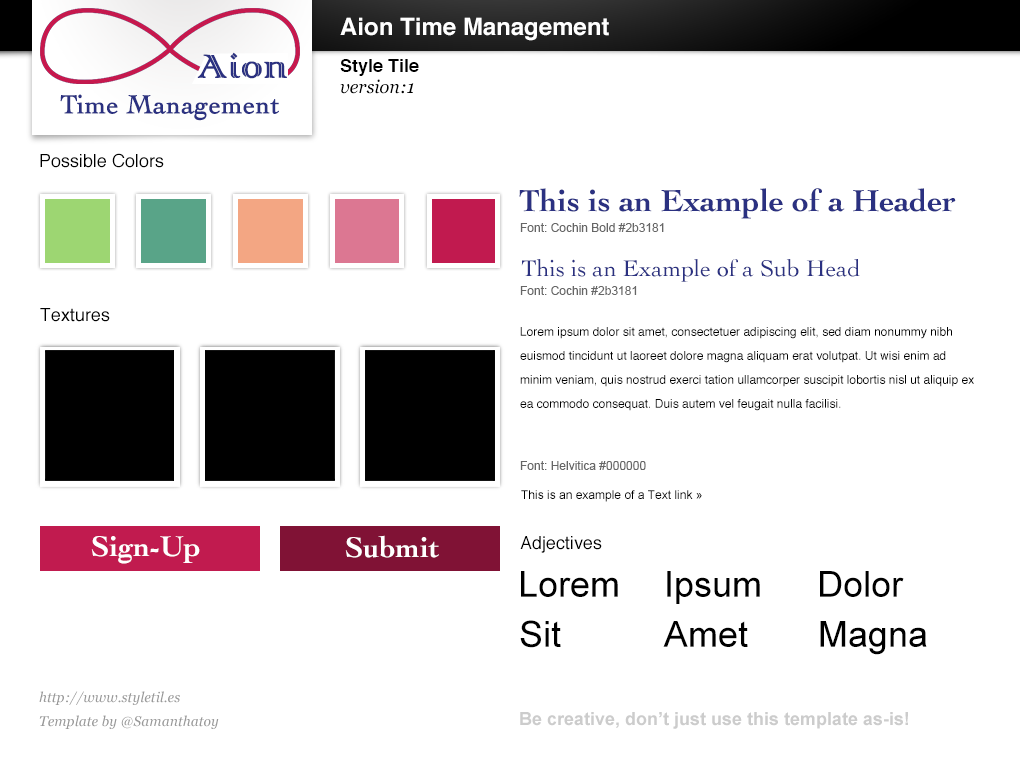
<style>
.page{position:relative;width:1020px;height:760px;background:#ffffff}
.page>*{position:absolute;margin:0}
.t1{font:24px "Helvetica-Bold";color:#ffffff}
.t2{font:43.1px "ColonnaMT";color:#2b3181;font-weight:bold}
.t3{font:18px "Helvetica-Bold";color:#000000}
.t4{font:18px "Georgia-Italic";color:#000000}
.t5{font:26.9px "Cochin";color:#2b3181;font-weight:bold}
.t6{font:18px "Helvetica";color:#000000}
.t7{font:32px "Cochin-Bold";color:#2b3181}
.t8{font:12px "ArialMT";color:#666666}
.t9{font:24px "Cochin";color:#2b3181}
.t10{font:12px/24px "Helvetica";color:#000000}
.t11{font:12px "ArialMT";color:#000000}
.t12{font:30px "Cochin-Bold";color:#ffffff}
.t13{font:36px "ArialMT";color:#000000}
.t14{font:14px/24px "Georgia-Italic";color:#999999}
.t15{font:18px "Arial-BoldMT";color:#cccccc}
</style>
<div class="page">
<p class="t1" style="left:340px;top:17px;width:269px;height:24px">Aion Time Management</p>
<p class="t2" style="left:197px;top:52px;width:90px;height:27px">Aion</p>
<p class="t3" style="left:340px;top:59px;width:79px;height:17px">Style Tile</p>
<p class="t4" style="left:340px;top:79px;width:74px;height:15px">version:1</p>
<p class="t5" style="left:60px;top:94px;width:219px;height:27px">Time Management</p>
<p class="t6" style="left:40px;top:153px;width:124px;height:15px">Possible Colors</p>
<p class="t7" style="left:519px;top:188px;width:437px;height:31px">This is an Example of a Header</p>
<p class="t8" style="left:520px;top:223px;width:144px;height:9px">Font: Cochin Bold #2b3181</p>
<p class="t9" style="left:521px;top:259px;width:339px;height:23px">This is an Example of a Sub Head</p>
<p class="t8" style="left:520px;top:286px;width:117px;height:9px">Font: Cochin #2b3181</p>
<p class="t6" style="left:40px;top:308px;width:70px;height:14px">Textures</p>
<p class="t10" style="left:520px;top:327px;width:454px;height:84px">Lorem ipsum dolor sit amet, consectetuer adipiscing elit, sed diam nonummy nibh euismod tincidunt ut laoreet dolore magna aliquam erat volutpat. Ut wisi enim ad minim veniam, quis nostrud exerci tation ullamcorper suscipit lobortis nisl ut aliquip ex ea commodo consequat. Duis autem vel feugait nulla facilisi.</p>
<p class="t8" style="left:520px;top:461px;width:126px;height:9px">Font: Helvitica #000000</p>
<p class="t11" style="left:521px;top:490px;width:181px;height:12px">This is an example of a Text link »</p>
<p class="t12" style="left:91px;top:536px;width:109px;height:28px">Sign-Up</p>
<p class="t12" style="left:345px;top:535px;width:94px;height:23px">Submit</p>
<p class="t6" style="left:520px;top:536px;width:82px;height:17px">Adjectives</p>
<p class="t13" style="left:521px;top:571px;width:97px;height:26px">Lorem</p>
<p class="t13" style="left:667px;top:571px;width:93px;height:33px">Ipsum</p>
<p class="t13" style="left:820px;top:571px;width:84px;height:26px">Dolor</p>
<p class="t13" style="left:520px;top:620px;width:41px;height:28px">Sit</p>
<p class="t13" style="left:663px;top:621px;width:85px;height:26px">Amet</p>
<p class="t13" style="left:820px;top:621px;width:107px;height:34px">Magna</p>
<p class="t14" style="left:39px;top:691px;width:180px;height:38px">http://www.styletil.es<br>Template by @Samanthatoy</p>
<p class="t15" style="left:520px;top:712px;width:388px;height:17px">Be creative, don’t just use this template as-is!</p>
</div>
